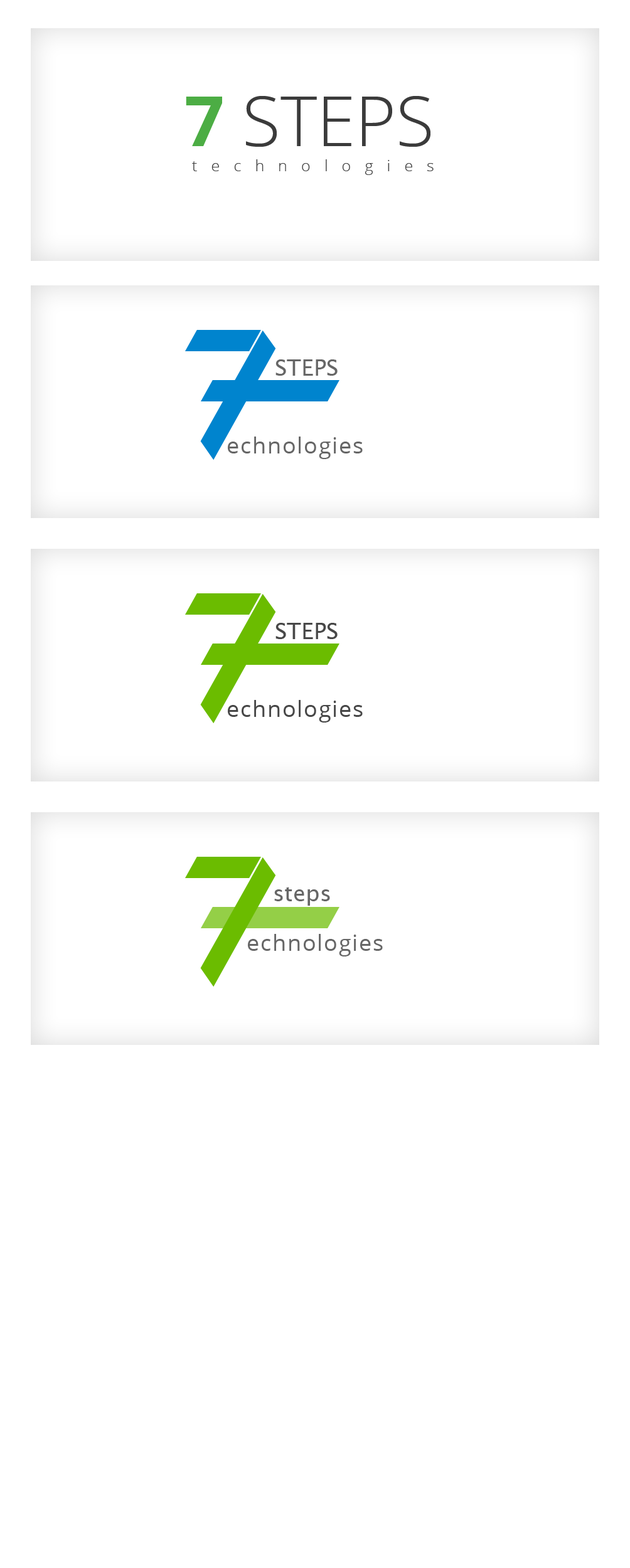
<style>
.page{position:relative;width:630px;height:1568px;background:#ffffff}
.page>*{position:absolute;margin:0}
.t1{font:69.6px "OpenSans-Light";color:#3b3b3b;text-transform:uppercase}
.t2{font:69.6px "OpenSans-Bold";color:#4cad44;text-transform:uppercase}
.t3{font:15.7px "OpenSans-Light";letter-spacing:0.885em;color:#444444}
.t4{font:22.6px "LucidaSans";color:#666666;text-transform:uppercase}
.t5{font:22.6px "OpenSans";letter-spacing:0.05em;color:#666666}
.t6{font:22.6px "LucidaSans";color:#464646;text-transform:uppercase}
.t7{font:22.6px "OpenSans";letter-spacing:0.05em;color:#474747}
.t8{font:22.6px "LucidaSans";color:#666666}
</style>
<div class="page">
<p class="t1" style="left:186px;top:96px;width:244px;height:51px"><span class="t2">7 </span>steps</p>
<p class="t3" style="left:192px;top:159px;width:241px;height:16px">technologies</p>
<p class="t4" style="left:275px;top:359px;width:62px;height:17px">STEPS</p>
<p class="t5" style="left:228px;top:437px;width:135px;height:22px">echnologies</p>
<p class="t6" style="left:275px;top:623px;width:62px;height:16px">STEPS</p>
<p class="t7" style="left:228px;top:700px;width:135px;height:23px">echnologies</p>
<p class="t8" style="left:274px;top:887px;width:56px;height:19px">steps</p>
<p class="t5" style="left:248px;top:934px;width:135px;height:22px">echnologies</p>
</div>
